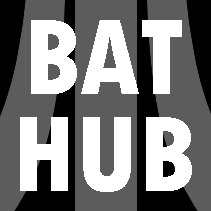
<style>
.page{position:relative;width:211px;height:211px;background:#5c5c5c}
.page>*{position:absolute;margin:0}
.t1{font:113.2px/97px "TwCenMT-CondensedExtraBold";color:#ffffff}
</style>
<div class="page">
<p class="t1" style="left:20px;top:20px;width:172px;height:172px;text-align:center">BAT<br>HUB</p>
</div>
